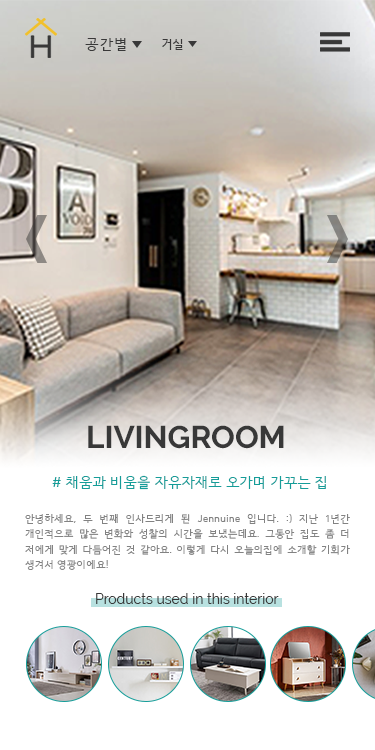
<style>
.page{position:relative;width:375px;height:750px;background:#ffffff}
.page>*{position:absolute;margin:0}
.t1{font:14px "HCRDotum";letter-spacing:0.1em;color:#383838}
.t2{font:11.9px "HCRDotum";color:#383838}
.t3{font:31.4px "Raleway-Bold";color:#383838}
.t4{font:14px "HCRDotum";color:#159d99}
.t5{font:10px/15.4px "HCRDotum";color:#828282}
.t6{font:14px "Raleway-Regular";color:#383838}
</style>
<div class="page">
<p class="t1" style="left:85px;top:38px;width:41px;height:13px">공간별</p>
<p class="t2" style="left:162px;top:39px;width:21px;height:11px">거실</p>
<p class="t3" style="left:88px;top:425px;width:196px;height:24px">LIVINGROOM</p>
<p class="t4" style="left:52px;top:475px;width:274px;height:15px"># 채움과 비움을 자유자재로 오가며 가꾸는 집</p>
<p class="t5" style="left:25px;top:514px;width:325px;height:56px;text-align:justify">안녕하세요, 두 번째 인사드리게 된 Jennuine 입니다. :) 지난 1년간 개인적으로 많은 변화와 성찰의 시간을 보냈는데요. 그동안 집도 좀 더 저에게 맞게 다듬어진 것 같아요. 이렇게 다시 오늘의집에 소개할 기회가 생겨서 영광이에요!</p>
<p class="t6" style="left:96px;top:593px;width:183px;height:11px">Products used in this interior</p>
</div>
